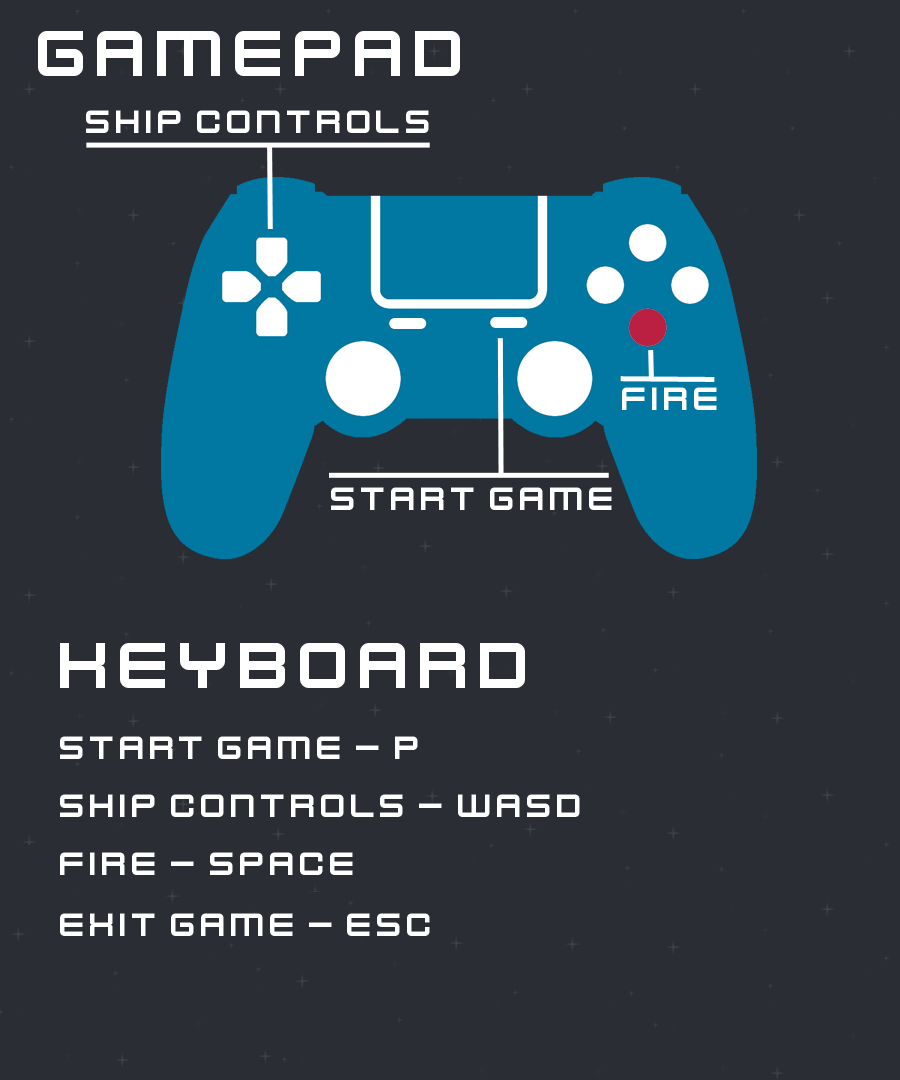
<style>
.page{position:relative;width:900px;height:1080px;background:#2a2d33}
.page>*{position:absolute;margin:0}
.t1{font:72px "KenVector-Future";color:#ffffff}
.t2{font:36px "KenVector-Future";color:#ffffff}
</style>
<div class="page">
<p class="t1" style="left:38px;top:31px;width:422px;height:45px">Gamepad</p>
<p class="t2" style="left:86px;top:110px;width:343px;height:23px">ship controls</p>
<p class="t2" style="left:622px;top:387px;width:95px;height:23px">fire</p>
<p class="t2" style="left:331px;top:487px;width:281px;height:23px">start game</p>
<p class="t1" style="left:60px;top:643px;width:465px;height:45px">keyboard</p>
<p class="t2" style="left:60px;top:736px;width:358px;height:23px">start game - P</p>
<p class="t2" style="left:60px;top:794px;width:520px;height:23px">ship controls - WASD</p>
<p class="t2" style="left:60px;top:852px;width:293px;height:23px">fire - space</p>
<p class="t2" style="left:60px;top:913px;width:370px;height:23px">exit game - esc</p>
</div>
